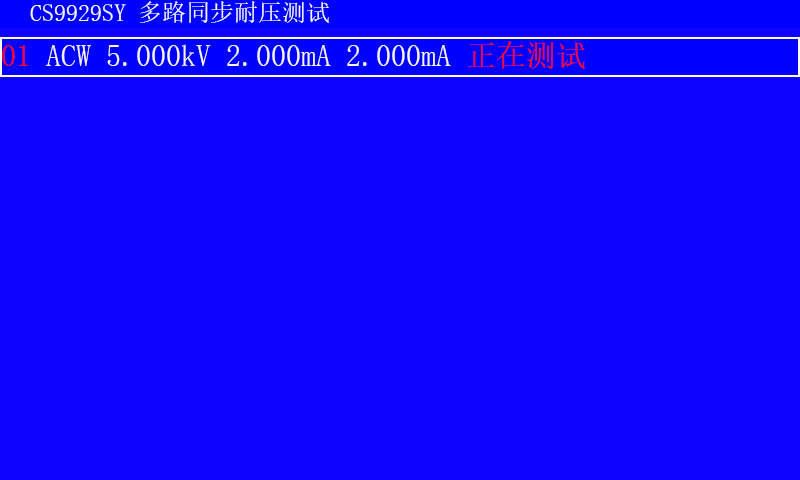
<style>
.page{position:relative;width:800px;height:480px;background:#0f03fd}
.page>*{position:absolute;margin:0}
.t1{font:24px "SimSun";color:#f9f7f5}
.t2{font:30px "SimSun";color:#040403}
.t3{font:30px "SimSun";color:#f8f4f0}
.t4{font:30px "SimSun";color:#fb0611}
.t5{font:30px "SimSun";color:#fc0a1b}
</style>
<div class="page">
<p class="t1" style="left:30px;top:1px;width:299px;height:22px"><span class="t2">  </span>CS9929SY 多路同步耐压测试</p>
<p class="t3" style="left:2px;top:41px;width:583px;height:28px"><span class="t4">01 </span>ACW 5.000kV 2.000mA 2.000mA <span class="t5">正在测试</span></p>
</div>
